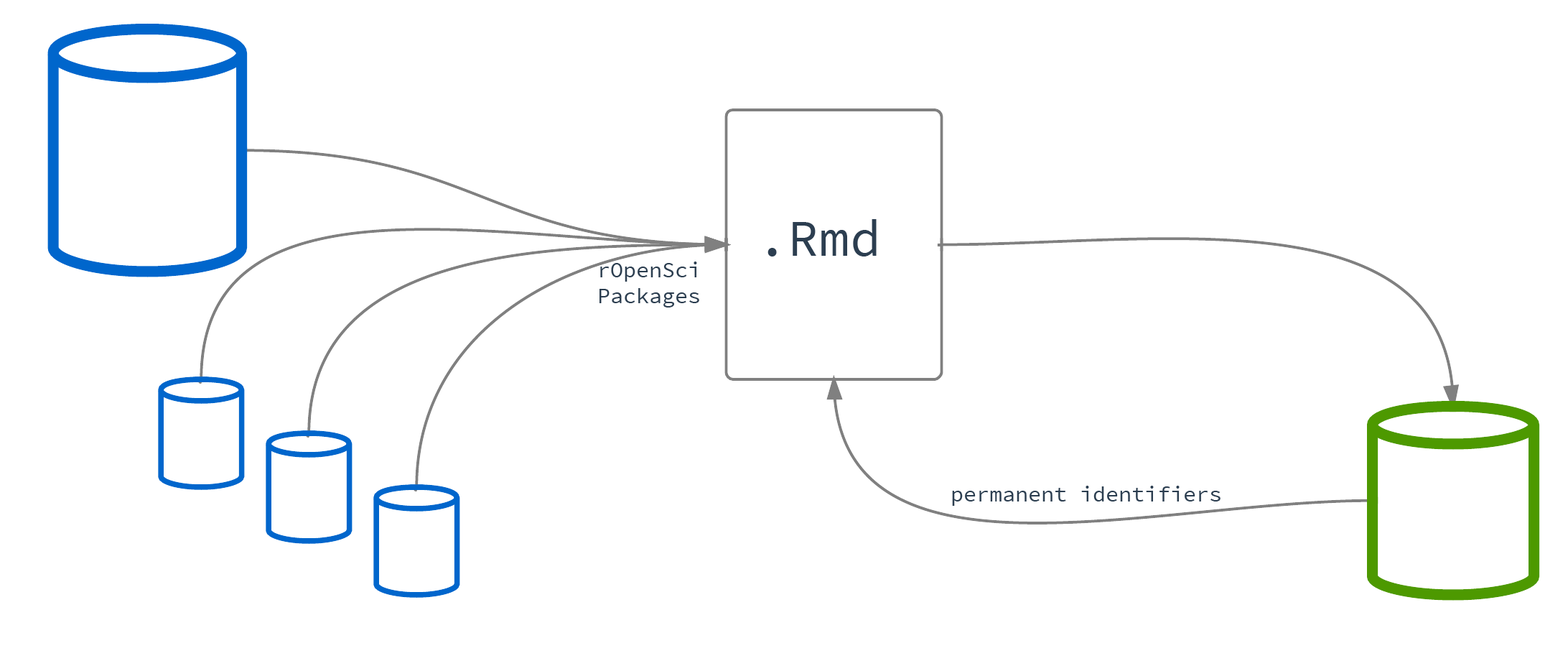
<style>
.page{position:relative;width:1568px;height:661px;background:#ffffff}
.page>*{position:absolute;margin:0}
.t1{font:51.7px "SourceCodePro-Regular";color:#2c3e50}
.t2{font:21.5px "SourceCodePro-Regular";color:#2c3e50}
</style>
<div class="page">
<p class="t1" style="left:767px;top:219px;width:110px;height:37px">.Rmd</p>
<p class="t2" style="left:599px;top:261px;width:100px;height:46px">rOpenSci<br>Packages</p>
<p class="t2" style="left:952px;top:485px;width:269px;height:20px">permanent identifiers</p>
</div>
